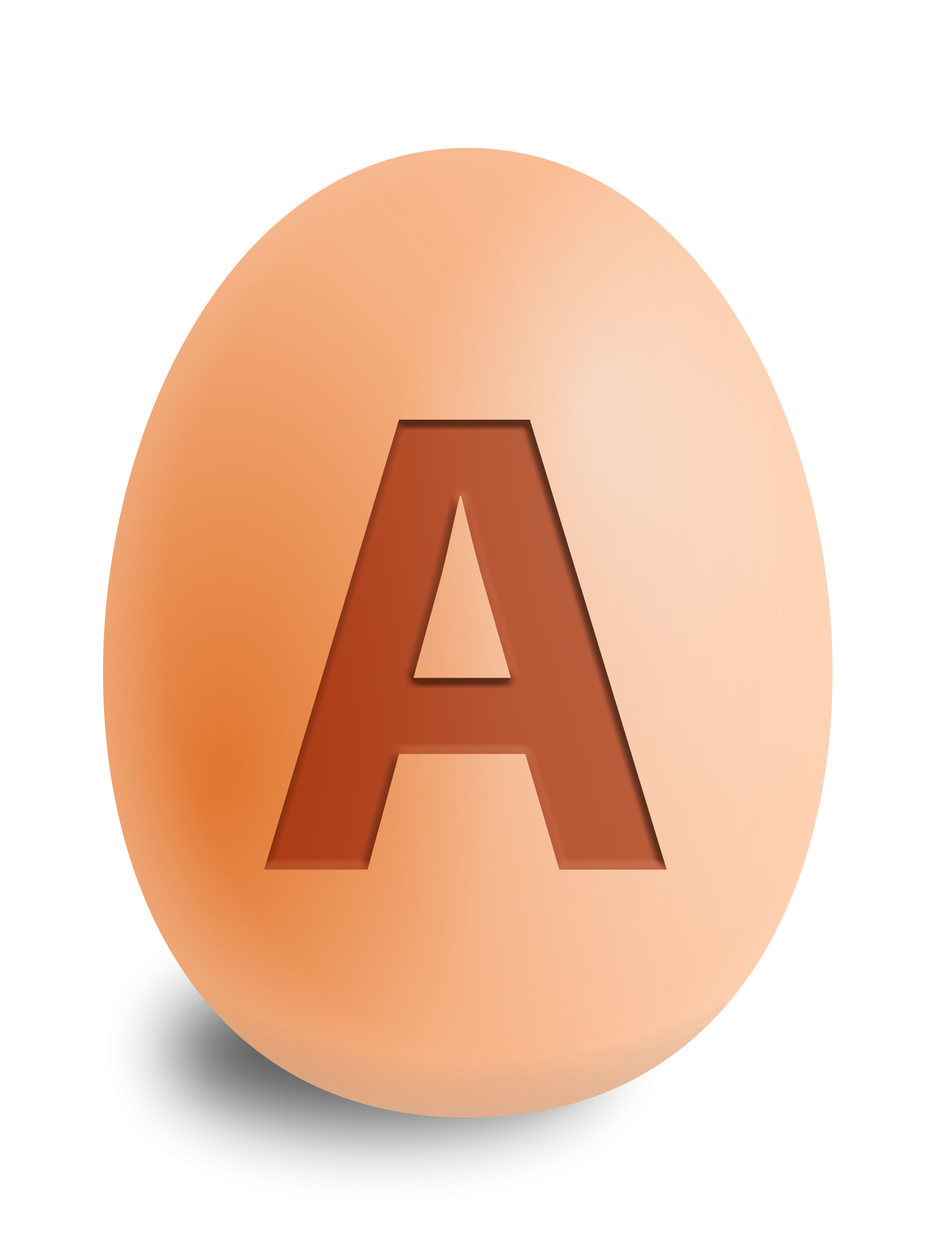
<style>
.page{position:relative;width:947px;height:1260px;background:#ffffff}
.page>*{position:absolute;margin:0}
.t1{font:667.4px "MyriadPro-Bold";color:#b4502d}
</style>
<div class="page">
<p class="t1" style="left:264px;top:420px;width:402px;height:449px">A</p>
</div>
